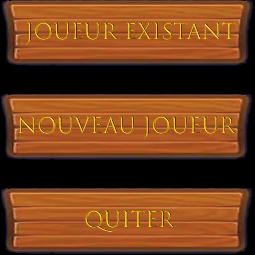
<style>
.page{position:relative;width:255px;height:255px;background:#000000}
.page>*{position:absolute;margin:0}
.t1{font:21.2px "TrajanColor-Concept"}
</style>
<div class="page">
<p class="t1" style="left:26px;top:22px;width:211px;height:23px">JouEUR Existant</p>
<p class="t1" style="left:18px;top:116px;width:220px;height:23px">NOUVEAU JOUEUR</p>
<p class="t1" style="left:85px;top:210px;width:92px;height:22px">QUITER</p>
</div>
